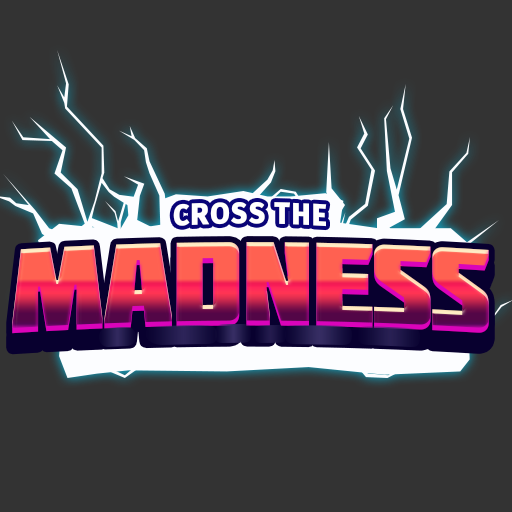
<style>
.page{position:relative;width:512px;height:512px;background:#333333}
.page>*{position:absolute;margin:0}
.t1{font:29.8px "FiraSans-Heavy";letter-spacing:0.05em;color:#ffffff;scale:0.96 1}
.t2{font:119px "Molot";letter-spacing:-0.025em}
</style>
<div class="page">
<p class="t1" style="left:173px;top:202px;width:154px;height:25px">CROSS THE</p>
<p class="t2" style="left:12px;top:242px;width:477px;height:92px">MADNESS</p>
</div>
